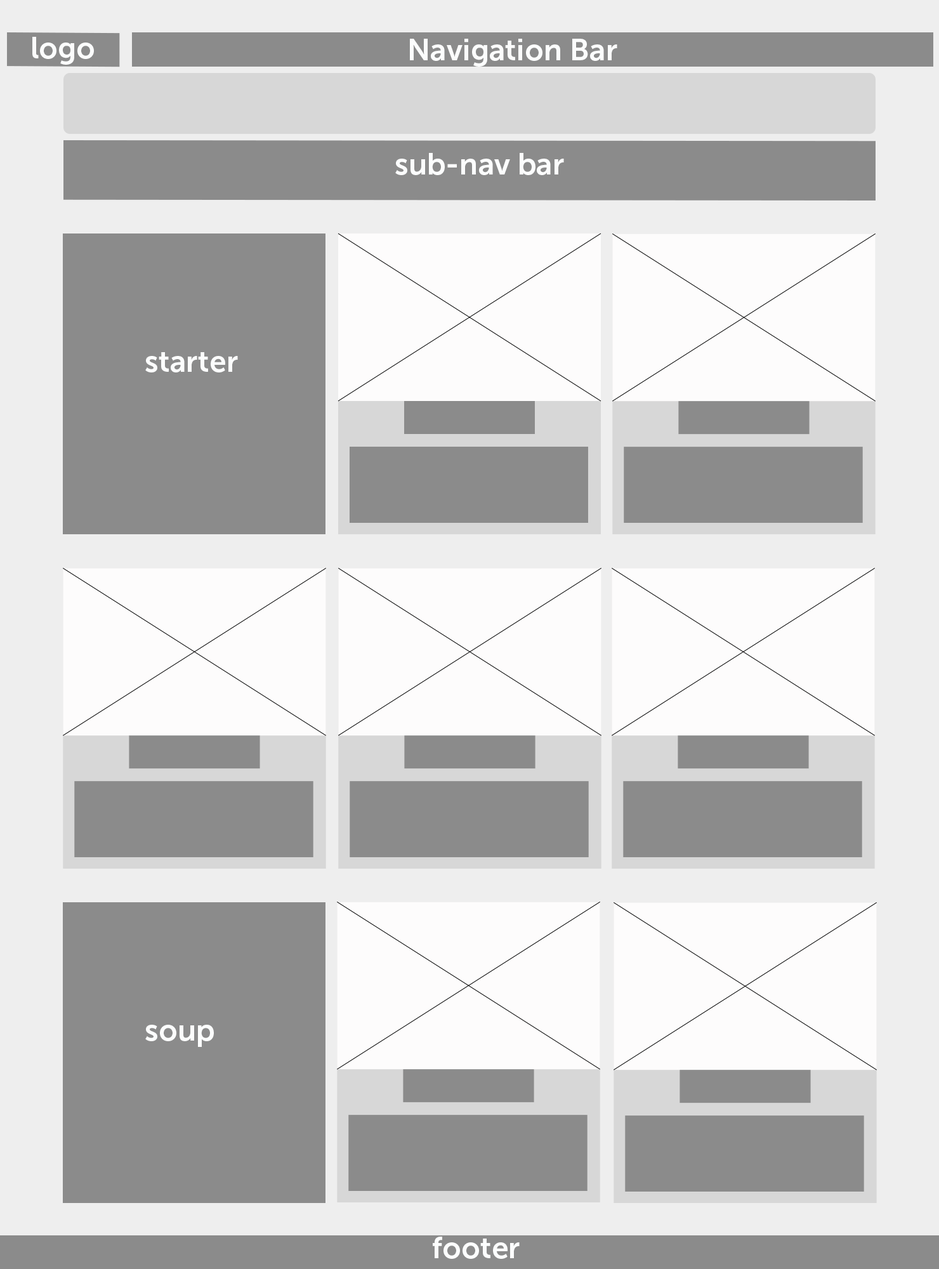
<style>
.page{position:relative;width:939px;height:1269px;background:#8b8b8b}
.page>*{position:absolute;margin:0}
.t1{font:30.5px "MuseoSans-700";color:#fcfdfd}
</style>
<div class="page">
<p class="t1" style="left:32px;top:37px;width:62px;height:28px">logo</p>
<p class="t1" style="left:410px;top:39px;width:208px;height:28px">Navigation Bar</p>
<p class="t1" style="left:395px;top:153px;width:169px;height:22px">sub-nav bar</p>
<p class="t1" style="left:145px;top:352px;width:93px;height:21px">starter</p>
<p class="t1" style="left:145px;top:1025px;width:69px;height:22px">soup</p>
<p class="t1" style="left:433px;top:1237px;width:87px;height:22px">footer</p>
</div>
